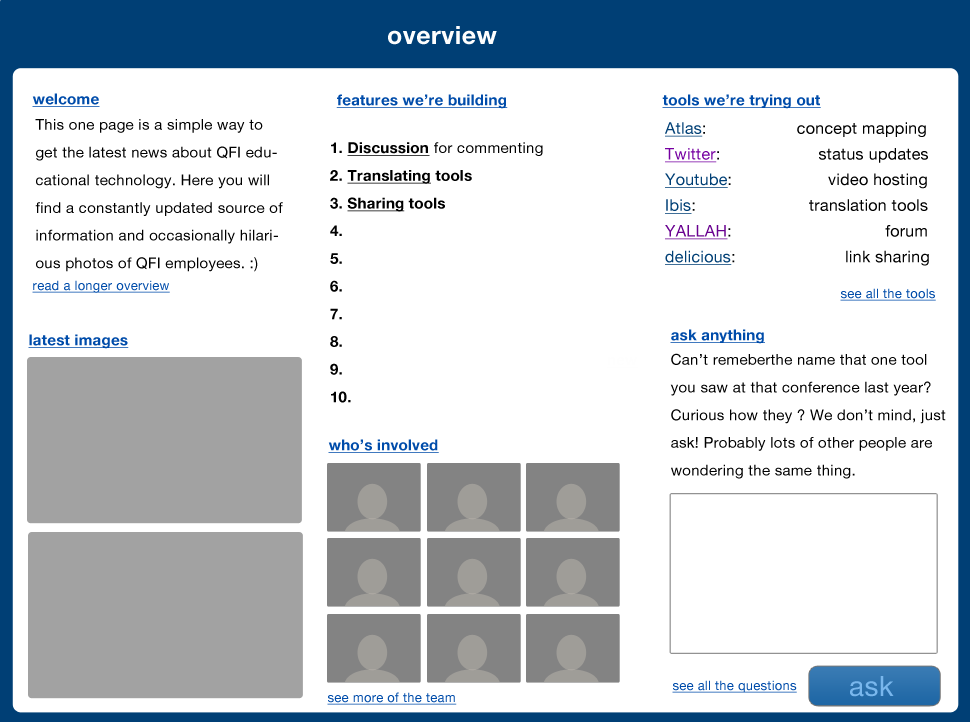
<style>
.page{position:relative;width:970px;height:722px;background:#ffffff}
.page>*{position:absolute;margin:0}
.t1{font:25px "HelveticaNeue-Bold";letter-spacing:0.02em;color:#fefefe}
.t2{font:15px "HelveticaNeue-Bold";letter-spacing:0.02em;color:#004caa;text-decoration:underline}
.t3{font:15px/27.7px "HelveticaNeue";letter-spacing:0.02em;color:#000000}
.t4{font:16px/25.7px "HelveticaNeue";letter-spacing:0.02em;color:#000000}
.t5{font:16px/21.7px "HelveticaNeue-Bold";letter-spacing:0.02em;color:#000000}
.t6{font:16px/25.7px "HelveticaNeue";letter-spacing:0.02em;color:#003f75;text-decoration:underline}
.t7{font:16px/25.7px "HelveticaNeue";letter-spacing:0.02em;color:#7500a1;text-decoration:underline}
.t8{font:16px/25.7px "HelveticaNeue";letter-spacing:0.02em;color:#690190;text-decoration:underline}
.t9{font:15px/27.7px "HelveticaNeue-Bold";letter-spacing:0.02em;color:#000000;font-variant:small-caps}
.t10{font:15px/27.7px "HelveticaNeue-Bold";letter-spacing:0.02em;color:#000000;text-decoration:underline}
.t11{font:15px/27.7px "HelveticaNeue-Bold";letter-spacing:0.02em;color:#000000}
.t12{font:13px "HelveticaNeue";letter-spacing:0.02em;color:#004caa;text-decoration:underline}
.t13{font:15px/39.7px "HelveticaNeue";letter-spacing:0.02em;color:#000000}
.t14{font:28px "HelveticaNeue";letter-spacing:0.02em;color:#79b7ed}
</style>
<div class="page">
<p class="t1" style="left:388px;top:26px;width:109px;height:19px">overview</p>
<p class="t2" style="left:32px;top:93px;width:68px;height:14px">welcome</p>
<p class="t2" style="left:336px;top:94px;width:172px;height:15px">features we’re building</p>
<p class="t2" style="left:662px;top:94px;width:159px;height:15px">tools we’re trying out</p>
<p class="t3" style="left:35px;top:119px;width:248px;height:153px">This one page is a simple way to get the latest news about QFI educational technology. Here you will find a constantly updated source of information and occasionally hilarious photos of QFI employees. :)</p>
<p class="t4" style="left:665px;top:122px;width:264px;height:144px"><span class="t5"><br></span><span class="t6">Atlas</span>:        concept mapping<br><span class="t7">Twitter</span>:      status updates<br><span class="t6">Youtube</span>:        video hosting<br><span class="t6">Ibis</span>:     translation tools<br><span class="t8">YALLAH</span>:                   forum<br><span class="t6">delicious</span>:    link sharing</p>
<p class="t9" style="left:330px;top:142px;width:213px;height:261px">1. <span class="t10">Discussion </span><span class="t3">for commenting<br></span>2. <span class="t10">Translating</span><span class="t11"> tools</span> <br>3. <span class="t10">Sharing </span><span class="t11">tools</span> <br>4. <br>5. <br>6. <br>7. <br>8. <br>9. <br>10.</p>
<p class="t12" style="left:32px;top:280px;width:138px;height:13px">read a longer overview</p>
<p class="t12" style="left:840px;top:288px;width:96px;height:13px">see all the tools</p>
<p class="t2" style="left:670px;top:329px;width:95px;height:15px">ask anything</p>
<p class="t2" style="left:28px;top:334px;width:101px;height:15px">latest images</p>
<p class="t3" style="left:670px;top:353px;width:276px;height:126px"><span class="t13">Can’t remeberthe name that one tool </span>you saw at that conference last year? Curious how they ? We don’t mind, just ask! Probably lots of other people are wondering the same thing.</p>
<p class="t2" style="left:328px;top:439px;width:111px;height:14px">who’s involved</p>
<p class="t14" style="left:850px;top:676px;width:44px;height:21px">ask</p>
<p class="t12" style="left:672px;top:680px;width:125px;height:13px">see all the questions</p>
<p class="t12" style="left:327px;top:692px;width:130px;height:13px">see more of the team</p>
</div>
